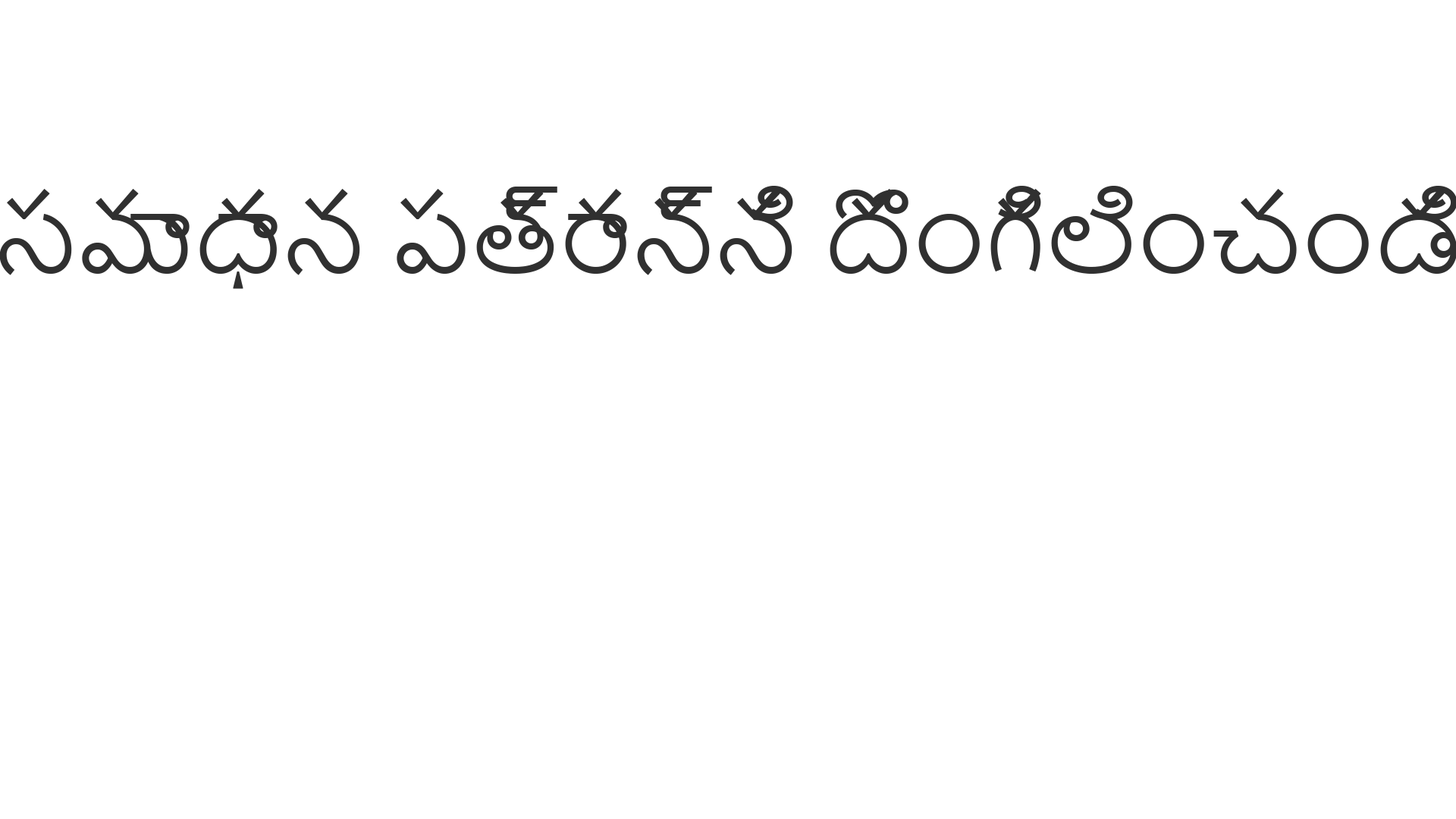
<style>
.page{position:relative;width:1456px;height:819px;background:#ffffff}
.page>*{position:absolute;margin:0}
.t1{font:98.6px "NirmalaUI";color:#303030}
</style>
<div class="page">
<p class="t1" style="left:0px;top:186px;width:1457px;height:103px">సమాధాన పత్రాన్ని దొంగిలించండి</p>
</div>
